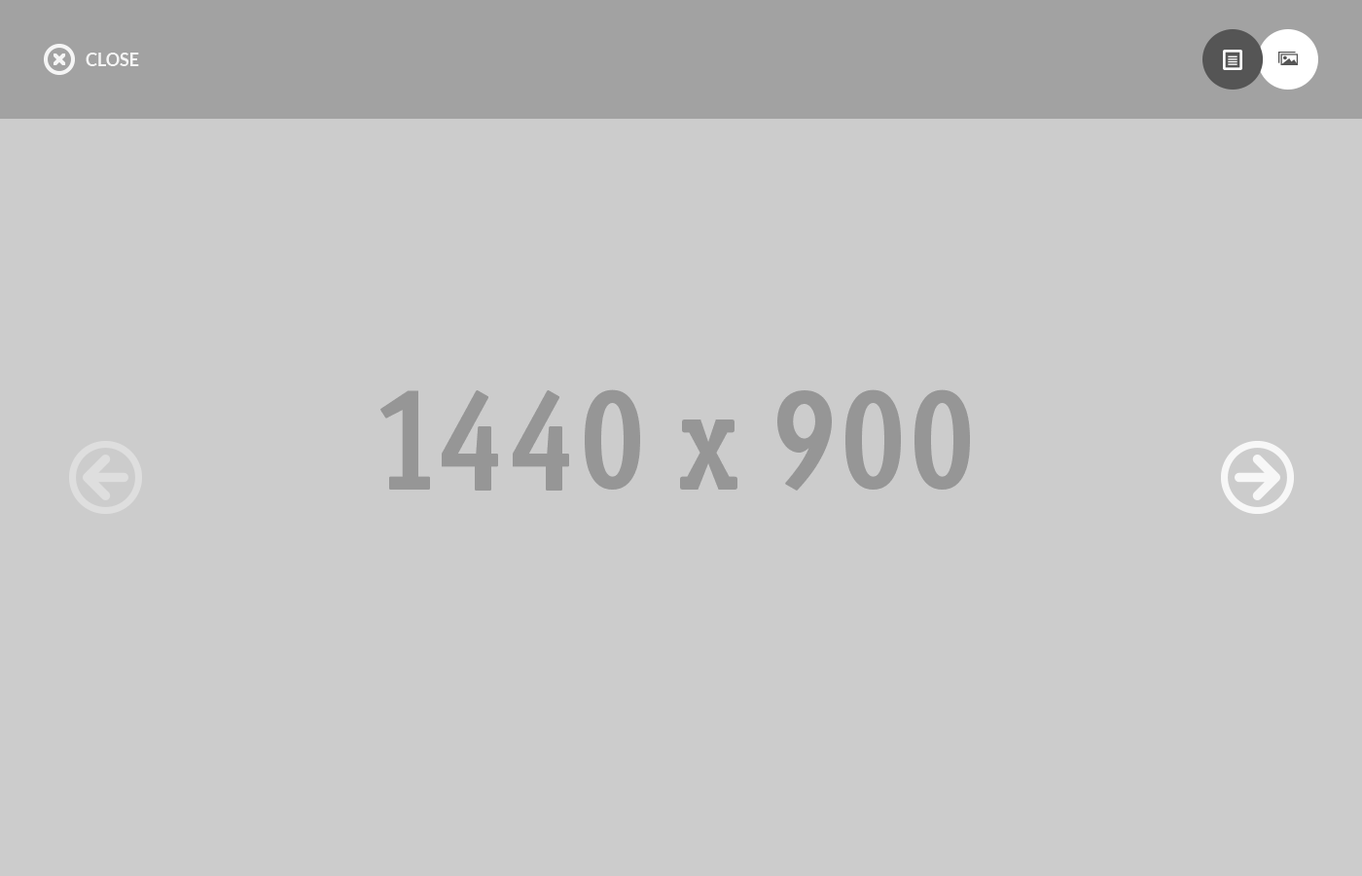
<style>
.page{position:relative;width:1362px;height:876px;background:#cccccc}
.page>*{position:absolute;margin:0}
.t1{font:17.5px "Lato-Bold";color:#f5f5f5;text-transform:uppercase}
</style>
<div class="page">
<p class="t1" style="left:86px;top:53px;width:53px;height:13px">Close</p>
<p class="t1" style="left:86px;top:53px;width:53px;height:13px">Close</p>
</div>
